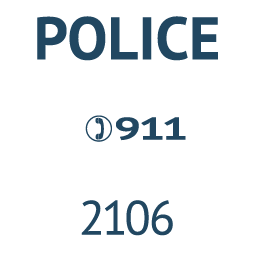
<style>
.page{position:relative;width:256px;height:256px;background:#ffffff}
.page>*{position:absolute;margin:0}
.t1{font:60px "PTSans-Bold";color:#214761}
.t2{font:31.2px "PTSans-Bold";letter-spacing:-0.025em;color:#214761;text-transform:uppercase;scale:1.54 1}
.t3{font:48px "PTSans-Regular";letter-spacing:-0.025em;color:#214761;text-transform:uppercase}
</style>
<div class="page">
<p class="t1" style="left:37px;top:16px;width:181px;height:45px">POLICE</p>
<p class="t2" style="left:116px;top:117px;width:70px;height:24px">911</p>
<p class="t3" style="left:81px;top:200px;width:92px;height:36px">2106</p>
</div>
